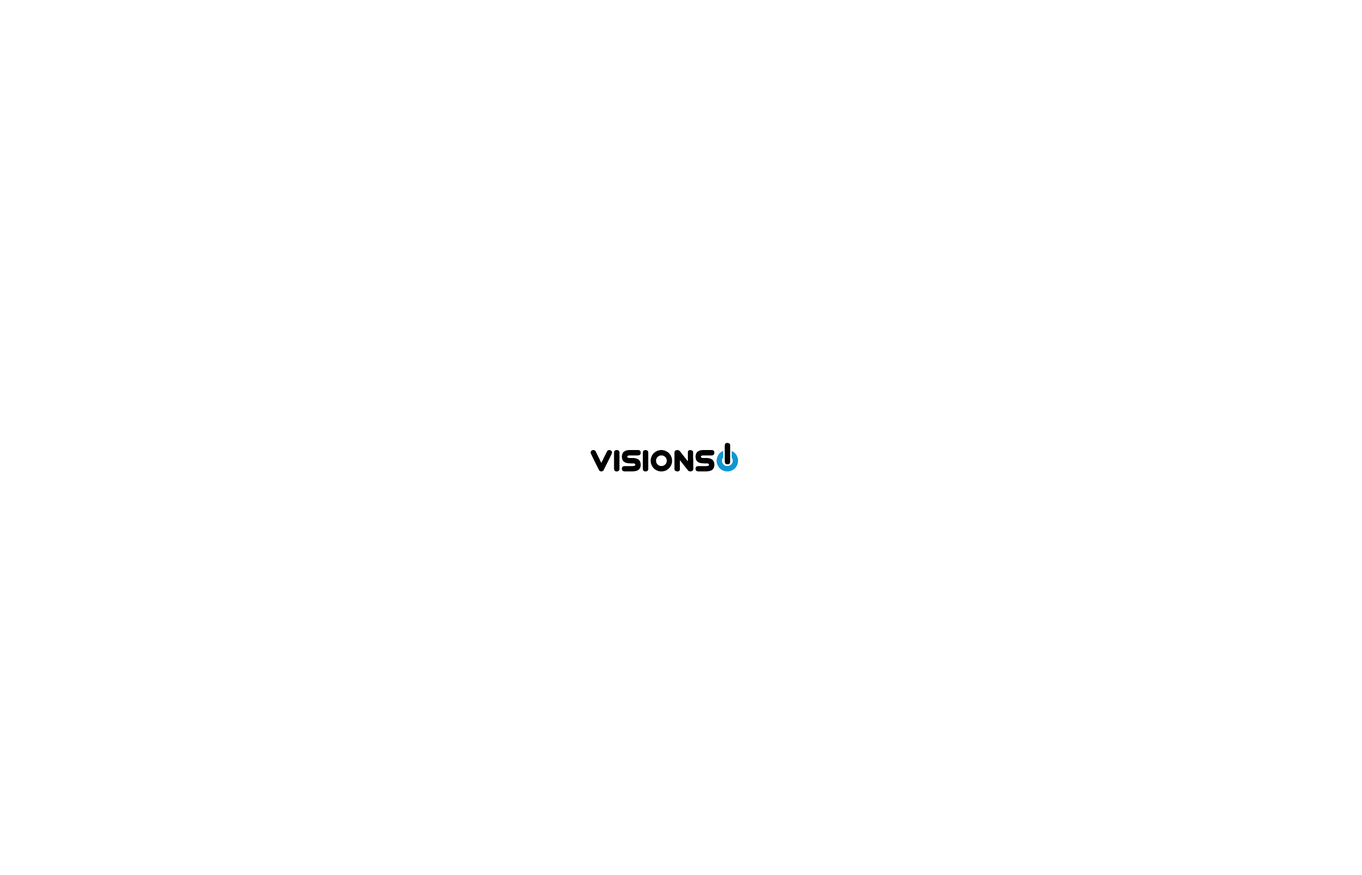
<style>
.page{position:relative;width:1362px;height:875px;background:#ffffff}
.page>*{position:absolute;margin:0}
.t1{font:34.2px "Virgo01";color:#000000}
.t2{font:34.2px "Virgo01";color:#1196d1}
</style>
<div class="page">
<p class="t1" style="left:724px;top:443px;width:7px;height:21px">I</p>
<p class="t1" style="left:590px;top:450px;width:148px;height:22px">Visions<span class="t2">O</span></p>
</div>
